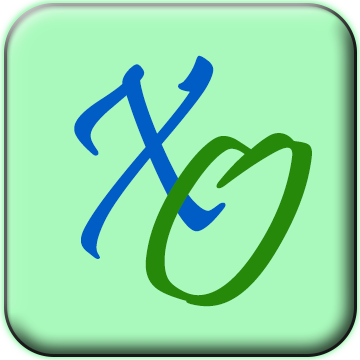
<style>
.page{position:relative;width:360px;height:360px;background:#a9f9bc}
.page>*{position:absolute;margin:0}
.t1{font:250px "Pristina-Regular";color:#005dc6}
.t2{font:250px "Pristina-Regular";color:#288a09;scale:1.13 1}
</style>
<div class="page">
<p class="t1" style="left:74px;top:55px;width:152px;height:204px;rotate:-12deg">X</p>
<p class="t2" style="left:145px;top:133px;width:167px;height:174px;rotate:3deg">O</p>
</div>
